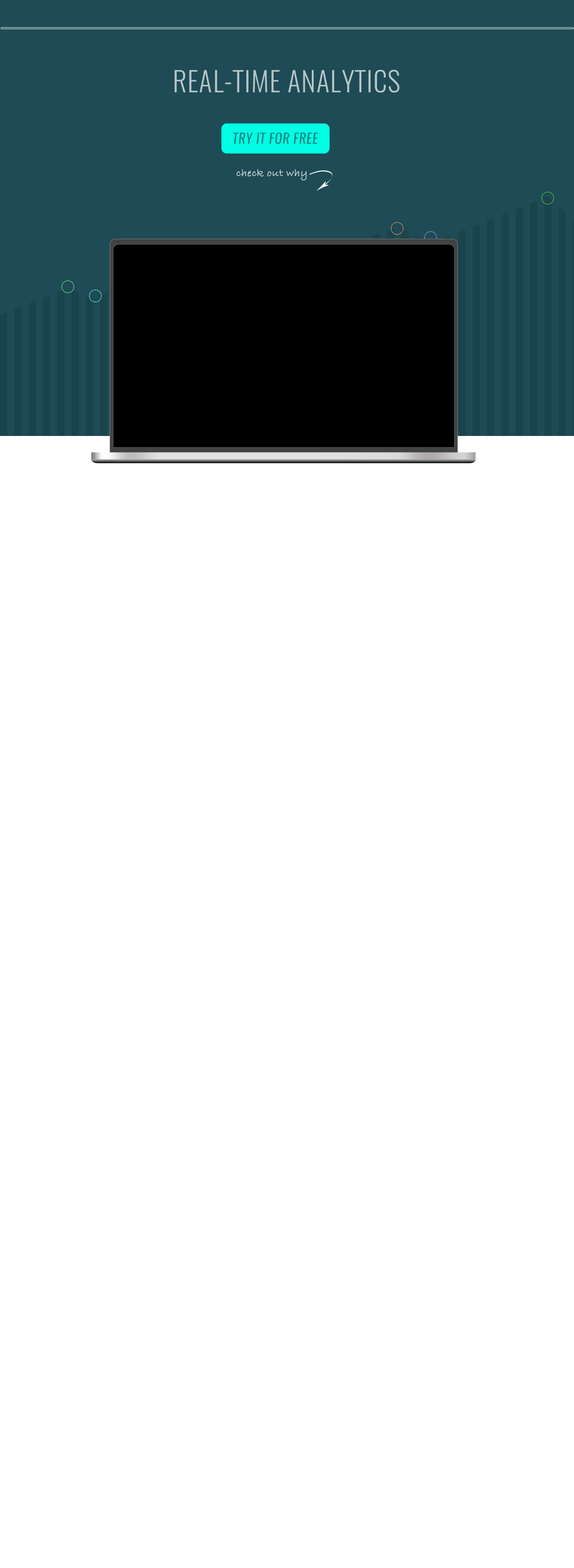
<style>
.page{position:relative;width:574px;height:1568px;background:#ffffff}
.page>*{position:absolute;margin:0}
.t1{font:27.6px "Oswald-Light";letter-spacing:0.025em;color:#b7c5c8}
.t2{font:13.7px "Oswald-RegularItalic";letter-spacing:0.025em;color:#148583}
.t3{font:11px "BradleyHandITCTTBold";letter-spacing:0.025em;color:#cbd5d8}
</style>
<div class="page">
<p class="t1" style="left:175px;top:70px;width:225px;height:23px">REAL-TIME ANALYTICS</p>
<p class="t2" style="left:233px;top:132px;width:85px;height:12px">TRY IT FOR FREE</p>
<p class="t3" style="left:237px;top:169px;width:70px;height:12px">check out why</p>
</div>
